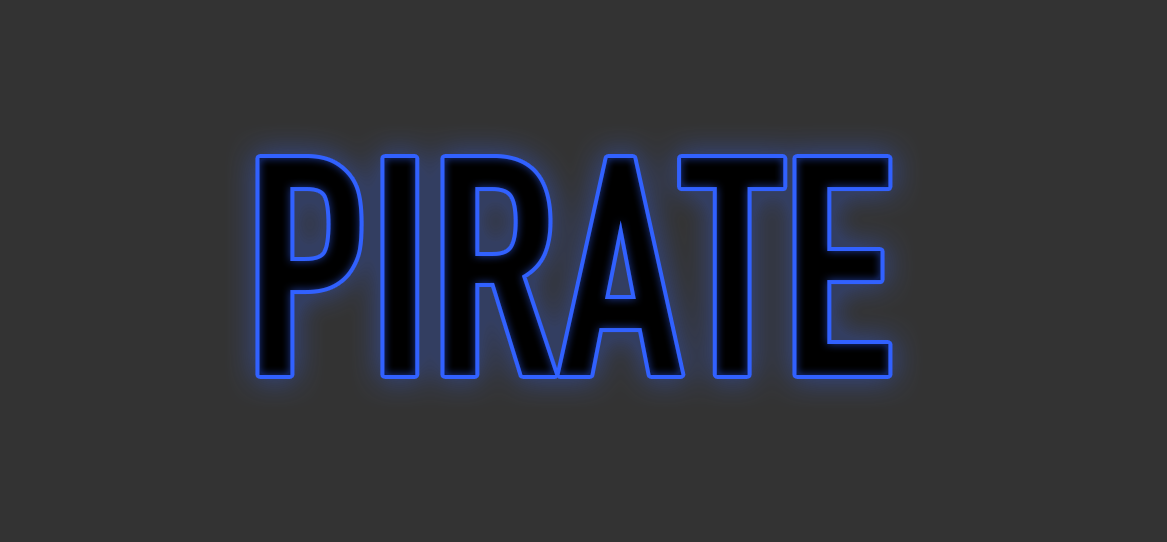
<style>
.page{position:relative;width:1167px;height:542px;background:#333333}
.page>*{position:absolute;margin:0}
.t1{font:302.5px "DINEngschrift";color:#010204}
</style>
<div class="page">
<p class="t1" style="left:259px;top:158px;width:630px;height:217px">PIRATE</p>
</div>
